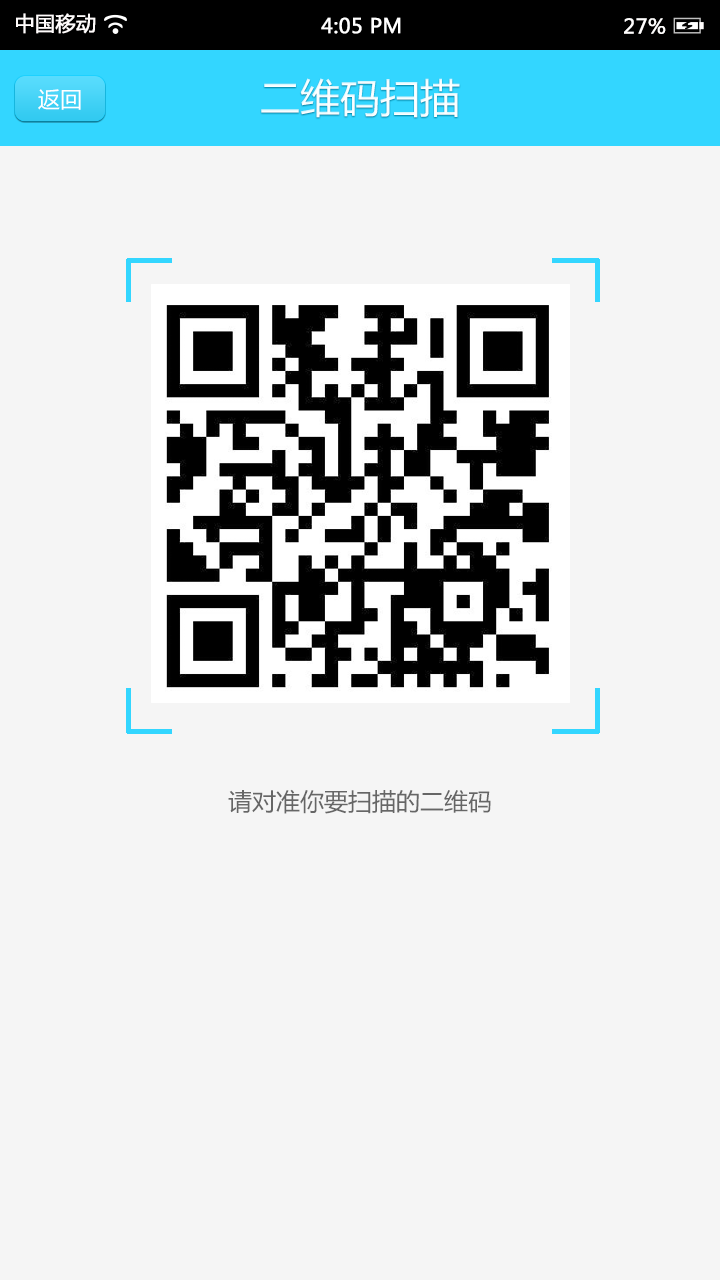
<style>
.page{position:relative;width:720px;height:1280px;background:#f5f5f5}
.page>*{position:absolute;margin:0}
.t1{font:20px "MicrosoftYaHei";color:#fffcfc;font-weight:bold}
.t2{font:20px "MicrosoftYaHei";color:#ffffff;font-weight:bold}
.t3{font:20px "MicrosoftYaHei";color:#fffefe;font-weight:bold}
.t4{font:40px "MicrosoftYaHei";color:#ffffff}
.t5{font:22px "MicrosoftYaHei";color:#ffffff}
.t6{font:24px "MicrosoftYaHei";color:#666666}
</style>
<div class="page">
<p class="t1" style="left:16px;top:13px;width:80px;height:21px">中国移动</p>
<p class="t2" style="left:321px;top:17px;width:80px;height:17px">4:05 PM</p>
<p class="t3" style="left:624px;top:18px;width:42px;height:16px">27%</p>
<p class="t4" style="left:261px;top:78px;width:199px;height:40px">二维码扫描</p>
<p class="t5" style="left:38px;top:89px;width:43px;height:21px">返回</p>
<p class="t6" style="left:228px;top:789px;width:263px;height:25px">请对准你要扫描的二维码</p>
</div>
